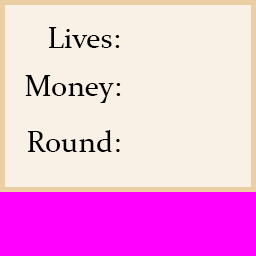
<style>
.page{position:relative;width:256px;height:256px;background:#f9f1e5}
.page>*{position:absolute;margin:0}
.t1{font:30px "Constantia";color:#000000}
</style>
<div class="page">
<p class="t1" style="left:49px;top:27px;width:71px;height:21px">Lives:</p>
<p class="t1" style="left:25px;top:75px;width:96px;height:28px">Money:</p>
<p class="t1" style="left:27px;top:130px;width:93px;height:22px">Round:</p>
</div>
